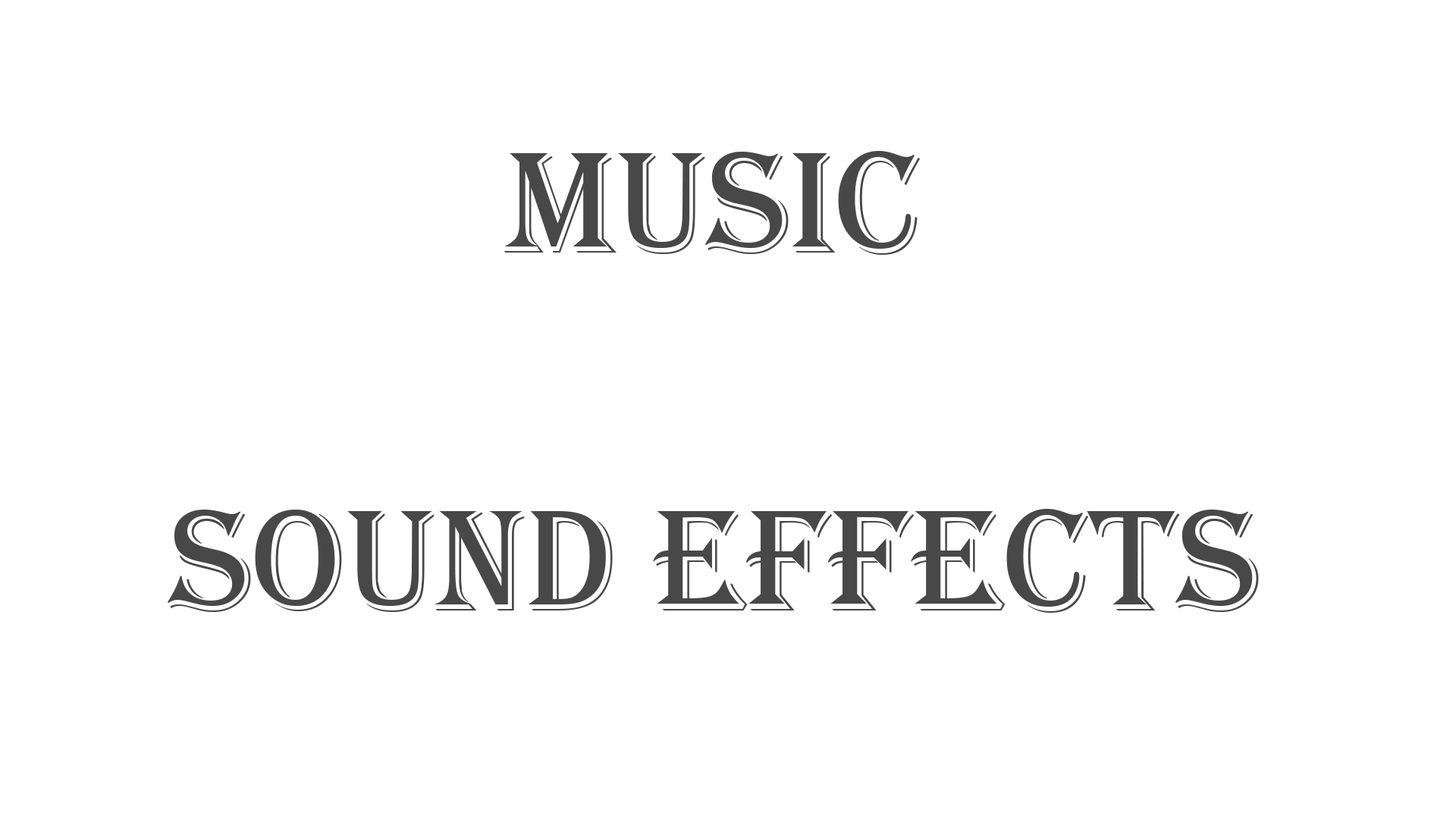
<style>
.page{position:relative;width:1456px;height:819px;background:#ffffff}
.page>*{position:absolute;margin:0}
.t1{font:149.4px "Algerian";color:#484848}
.t2{font:54.6px "Algerian";color:#000000}
</style>
<div class="page">
<p class="t1" style="left:168px;top:151px;width:1091px;height:462px;text-align:center"><span class="t2"><br><br><br><br></span>MUSIC<br><br>SOUND EFFECTS</p>
</div>
